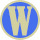
<style>
.page{position:relative;width:40px;height:40px;background:#d4d1a0}
.page>*{position:absolute;margin:0}
.t1{font:36.4px "BernardMT-Condensed";color:#d4d1a0}
</style>
<div class="page">
<p class="t1" style="left:7px;top:6px;width:26px;height:30px">W</p>
</div>
